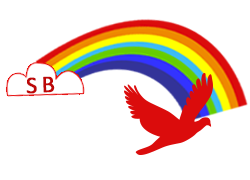
<style>
.page{position:relative;width:250px;height:180px;background:#ffffff}
.page>*{position:absolute;margin:0}
.t1{font:24px "Calibri";letter-spacing:0.16em;color:#bd0808;text-transform:uppercase;font-weight:bold}
</style>
<div class="page">
<p class="t1" style="left:26px;top:76px;width:29px;height:18px;rotate:-2deg">sb</p>
</div>
